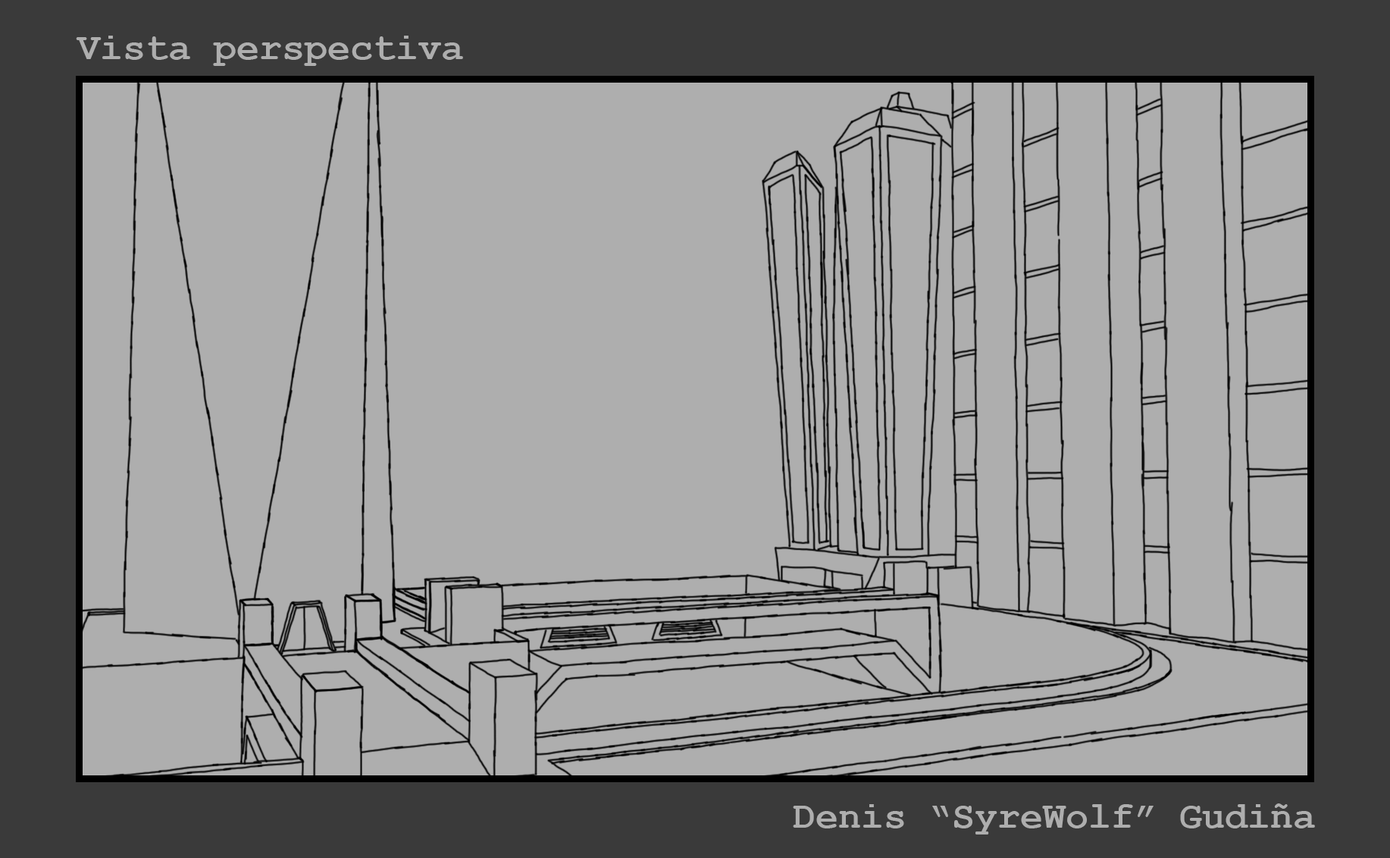
<style>
.page{position:relative;width:1390px;height:858px;background:#aeaeae}
.page>*{position:absolute;margin:0}
.t1{font:37.9px "CourierNewPS-BoldMT";color:#aeaeae}
</style>
<div class="page">
<p class="t1" style="left:76px;top:36px;width:387px;height:30px">Vista perspectiva</p>
<p class="t1" style="left:793px;top:803px;width:522px;height:31px">Denis “SyreWolf” Gudiña</p>
</div>
